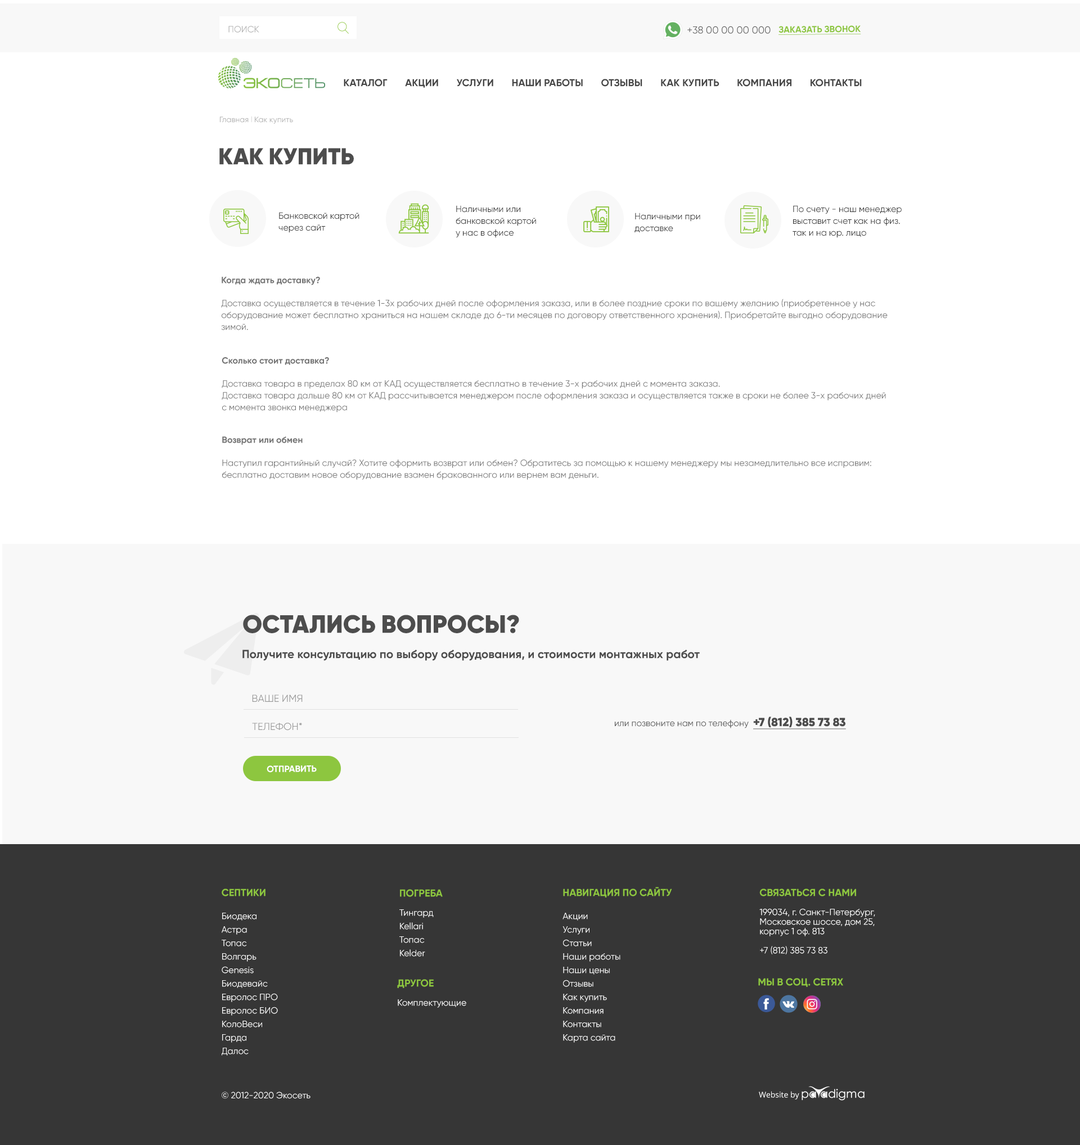
<style>
.page{position:relative;width:1080px;height:1145px;background:#ffffff}
.page>*{position:absolute;margin:0}
.t1{font:9px "Gilroy-Regular";color:#b1b1b1;text-transform:uppercase}
.t2{font:10.1px "Gilroy-Regular";color:#636363;text-transform:uppercase}
.t3{font:9px "Gilroy-Bold";color:#8dc63f;text-transform:uppercase;text-decoration:underline}
.t4{font:10.1px "Gilroy-Bold";color:#464646;text-transform:uppercase}
.t5{font:7.9px "Gilroy-Regular";color:#acacac}
.t6{font:7.9px "Gilroy-Regular";color:#d7d7d7}
.t7{font:23.1px "Gilroy-Black";color:#4c4c4c;text-transform:uppercase}
.t8{font:9px/11.8px "Gilroy-Regular";color:#363636}
.t9{font:9px/11.8px "Gilroy-Regular";color:#737373}
.t10{font:9px/23.1px "Gilroy-Bold";color:#737373}
.t11{font:9px/23.1px "Gilroy-Regular";color:#737373}
.t12{font:25px "Gilroy-Black";color:#4c4c4c;text-transform:uppercase}
.t13{font:11.8px "Gilroy-Bold";color:#4c4c4c}
.t14{font:10.1px "Gilroy-Regular";color:#999999;text-transform:uppercase}
.t15{font:9px "Gilroy-Regular";color:#4c4c4c}
.t16{font:11.8px "Gilroy-Black";color:#4c4c4c;text-decoration:underline}
.t17{font:9px "Gilroy-Bold";color:#ffffff;text-transform:uppercase}
.t18{font:9px/13.5px "Gilroy-Regular";color:#ffffff}
.t19{font:10.1px/9.6px "Gilroy-Bold";color:#8dc63f;text-transform:uppercase}
.t20{font:9px/9.6px "Gilroy-Regular";color:#ffffff}
.t21{font:10.1px/23.1px "Gilroy-Bold";color:#ffffff;text-transform:uppercase}
.t22{font:10.1px "Gilroy-Bold";color:#8dc63f;text-transform:uppercase}
.t23{font:10.1px "Gilroy-Bold";color:#ffffff;text-transform:uppercase}
.t24{font:9px "Gilroy-Regular";color:#ffffff}
.t25{font:7.9px "OpenSans";color:#ffffff}
</style>
<div class="page">
<p class="t1" style="left:228px;top:26px;width:31px;height:7px">поиск</p>
<p class="t2" style="left:687px;top:26px;width:84px;height:8px">+38 00 00 00 000</p>
<p class="t3" style="left:778px;top:25px;width:83px;height:10px;rotate:-1deg">заказать звонок</p>
<p class="t4" style="left:344px;top:79px;width:518px;height:9px">Каталог       Акции       Услуги       Наши работы       отзывы       Как купить       Компания       Контакты</p>
<p class="t5" style="left:220px;top:116px;width:73px;height:8px">Главная <span class="t6">l </span>Как купить</p>
<p class="t7" style="left:219px;top:148px;width:135px;height:17px">Как купить</p>
<p class="t8" style="left:456px;top:205px;width:80px;height:33px">Наличными или <br>банковской картой <br>у нас в офисе</p>
<p class="t8" style="left:793px;top:205px;width:109px;height:33px">По счету - наш менеджер <br>выставит счет как на физ. <br>так и на юр. лицо</p>
<p class="t8" style="left:278px;top:212px;width:81px;height:21px">Банковской картой <br>через сайт</p>
<p class="t8" style="left:634px;top:213px;width:66px;height:20px">Наличными при <br>доставке</p>
<p class="t9" style="left:221px;top:277px;width:667px;height:53px"><span class="t10">Когда ждать доставку? <br></span><span class="t11">Доставка осуществляется в течение 1-3х рабочих дней после оформления заказа, или в более поздние сроки по вашему желанию (приобретенное у нас <br></span>оборудование может бесплатно храниться на нашем складе до 6-ти месяцев по договору ответственного хранения). Приобретайте выгодно оборудование <br>зимой.</p>
<p class="t9" style="left:222px;top:357px;width:664px;height:55px"><span class="t10">Сколько стоит доставка?<br></span><span class="t11">Доставка товара в пределах 80 км от КАД осуществляется бесплатно в течение 3-х рабочих дней с момента заказа.<br></span>Доставка товара дальше 80 км от КАД рассчитывается менеджером после оформления заказа и осуществляется также в сроки не более 3-х рабочих дней <br>с момента звонка менеджера</p>
<p class="t11" style="left:222px;top:436px;width:649px;height:44px"><span class="t10">Возврат или обмен<br></span>Наступил гарантийный случай? Хотите оформить возврат или обмен? Обратитесь за помощью к нашему менеджеру мы незамедлительно все исправим: <br><span class="t9">бесплатно доставим новое оборудование взамен бракованного или вернем вам деньги.</span></p>
<p class="t12" style="left:243px;top:615px;width:276px;height:18px">Остались вопросы?</p>
<p class="t13" style="left:242px;top:650px;width:458px;height:11px">Получите консультацию по выбору оборудования, и стоимости монтажных работ</p>
<p class="t14" style="left:252px;top:695px;width:51px;height:7px">Ваше имя</p>
<p class="t14" style="left:252px;top:723px;width:50px;height:8px">телефон*</p>
<p class="t15" style="left:615px;top:717px;width:231px;height:13px">или позвоните нам по телефону  <span class="t16">+7 (812) 385 73 83</span></p>
<p class="t17" style="left:267px;top:766px;width:50px;height:7px;rotate:-1deg">отправить</p>
<p class="t18" style="left:222px;top:889px;width:56px;height:167px"><span class="t19">Септики<br><br></span>Биодека <br>Астра <br>Топас <br>Волгарь <br>Genesis <br>Биодевайс <br>Евролос ПРО <br>Евролос БИО <br>КолоВеси <br>Гарда <br>Далос</p>
<p class="t18" style="left:399px;top:889px;width:44px;height:68px"><span class="t19">погреба<br></span><span class="t20"><br>Тингард<br></span>Kellari<br>Топас<br>Kelder</p>
<p class="t18" style="left:562px;top:887px;width:110px;height:156px"><span class="t21"><br></span><span class="t19">навигация по сайту<br></span><span class="t20"><br>Акции   </span>    <br>Услуги       <br>Статьи       <br>Наши работы <br>Наши цены<br>Отзывы      <br>Как купить       <br>Компания       <br>Контакты<br>Карта сайта</p>
<p class="t20" style="left:759px;top:889px;width:116px;height:66px"><span class="t21"><br></span><span class="t19">связаться с нами <br></span><br>199034, г. Санкт-Петербург, <br>Московское шоссе, дом 25, <br>корпус 1 оф. 813<br><br>+7 (812) 385 73 83</p>
<p class="t20" style="left:397px;top:979px;width:69px;height:29px"><span class="t21"><br></span><span class="t19">Другое<br></span><br>Комплектующие</p>
<p class="t22" style="left:758px;top:978px;width:85px;height:9px"><span class="t23"><br></span>мы в соц. сетях</p>
<p class="t24" style="left:222px;top:1092px;width:88px;height:7px">© 2012-2020 Экосеть</p>
<p class="t25" style="left:759px;top:1091px;width:40px;height:9px">Website by</p>
</div>
